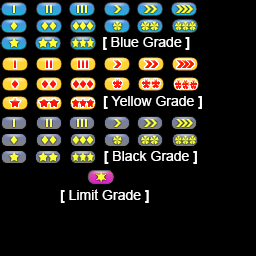
<style>
.page{position:relative;width:256px;height:256px;background:#000000}
.page>*{position:absolute;margin:0}
.t1{font:14px "ArialMT";color:#ffffff}
.t2{font:14px "Arial-BoldMT";color:#ffffff}
</style>
<div class="page">
<p class="t1" style="left:103px;top:37px;width:87px;height:13px"><span class="t2">[ </span>Blue Grade<span class="t2"> ]</span></p>
<p class="t1" style="left:103px;top:96px;width:99px;height:13px"><span class="t2">[ </span>Yellow Grade<span class="t2"> ]</span></p>
<p class="t1" style="left:104px;top:151px;width:93px;height:13px"><span class="t2">[</span> Black Grade <span class="t2">]</span></p>
<p class="t1" style="left:60px;top:189px;width:89px;height:14px"><span class="t2">[ </span>Limit Grade <span class="t2">]</span></p>
</div>
